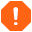
<style>
.page{position:relative;width:32px;height:32px;background:#ff6415}
.page>*{position:absolute;margin:0}
.t1{font:28px "CourierNewPS-BoldMT";color:#ffffff}
</style>
<div class="page">
<p class="t1" style="left:13px;top:7px;width:5px;height:18px">!</p>
</div>
